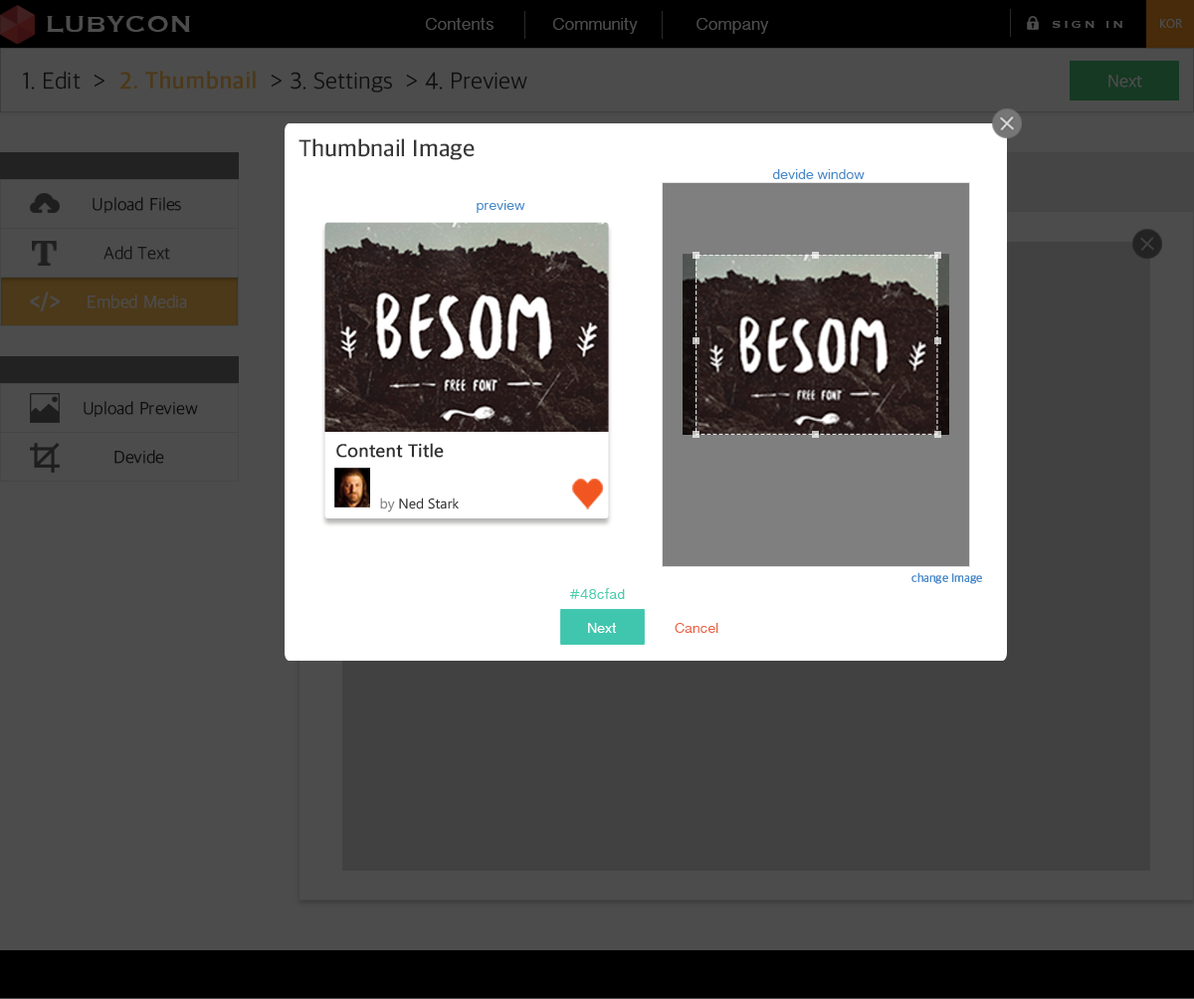
<style>
.page{position:relative;width:1194px;height:999px;background:#4c4c4c}
.page>*{position:absolute;margin:0}
.t1{font:29.8px "Copperplate";color:#4c4c4c}
.t2{font:17.9px "TamilSangamMN";color:#4c4c4c}
.t3{font:13.9px "Copperplate";letter-spacing:0.2em;color:#4c4c4c}
.t4{font:11.9px "LaoUI";color:#4c4c4c}
.t5{font:23.9px "AppleSDGothicNeo-Light"}
.t6{font:23.9px "AppleSDGothicNeo-Bold"}
.t7{font:17.9px "AppleSDGothicNeo-Light";color:#4c4c4c}
.t8{font:23.9px "AppleSDGothicNeo-SemiBold";color:#383838}
.t9{font:14.9px "TamilSangamMN";color:#488ccb}
.t10{font:17.9px "AppleSDGothicNeo-Light";color:#0e0e0e}
.t11{font:17.9px "AppleSDGothicNeo-Light";color:#151515}
.t12{font:17.7px "LaoUI";color:#2f2f2f;font-weight:bold}
.t13{font:13.8px "LaoUI";color:#2f2f2f}
.t14{font:13.8px "LaoUI";color:#808080}
.t15{font:11.9px "AppleSDGothicNeo-UltraLight";color:#488ccb;font-weight:bold}
.t16{font:14.9px "TamilSangamMN";color:#48cfad}
.t17{font:14.9px "TamilSangamMN";color:#ffffff}
.t18{font:14.9px "TamilSangamMN";color:#ec6446}
</style>
<div class="page">
<p class="t1" style="left:47px;top:16px;width:143px;height:17px">LUBYCON</p>
<p class="t2" style="left:426px;top:18px;width:67px;height:12px">Contents</p>
<p class="t2" style="left:553px;top:18px;width:85px;height:16px">Community</p>
<p class="t2" style="left:696px;top:18px;width:73px;height:16px">Company</p>
<p class="t3" style="left:1053px;top:21px;width:69px;height:7px">SIGN IN</p>
<p class="t4" style="left:1160px;top:19px;width:23px;height:9px">KOR</p>
<p class="t5" style="left:23px;top:71px;width:504px;height:22px">1. Edit  &gt;  <span class="t6">2. Thumbnail </span> &gt; 3. Settings  &gt; 4. Preview</p>
<p class="t7" style="left:1108px;top:75px;width:34px;height:13px">Next</p>
<p class="t8" style="left:298px;top:138px;width:177px;height:22px">Thumbnail Image</p>
<p class="t9" style="left:772px;top:169px;width:93px;height:10px">devide window</p>
<p class="t10" style="left:93px;top:197px;width:88px;height:16px">Upload Files</p>
<p class="t9" style="left:477px;top:200px;width:48px;height:13px">preview</p>
<p class="t11" style="left:103px;top:246px;width:67px;height:14px">Add Text</p>
<p class="t7" style="left:88px;top:294px;width:99px;height:14px">Embed Media</p>
<p class="t10" style="left:84px;top:401px;width:114px;height:16px">Upload Preview</p>
<p class="t10" style="left:114px;top:450px;width:50px;height:14px">Devide</p>
<p class="t12" style="left:336px;top:443px;width:108px;height:15px">Content Title</p>
<p class="t13" style="left:380px;top:497px;width:79px;height:15px"><span class="t14">by </span>Ned Stark</p>
<p class="t15" style="left:911px;top:572px;width:71px;height:12px">change Image</p>
<p class="t16" style="left:569px;top:588px;width:56px;height:11px">#48cfad</p>
<p class="t17" style="left:588px;top:623px;width:28px;height:10px">Next</p>
<p class="t18" style="left:675px;top:623px;width:43px;height:10px">Cancel</p>
</div>
